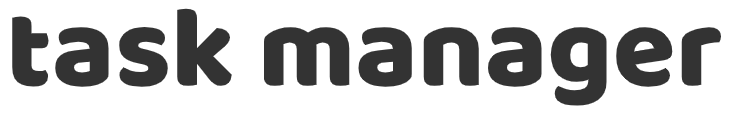
<style>
.page{position:relative;width:731px;height:113px;background:#ffffff}
.page>*{position:absolute;margin:0}
.t1{font:115px "BalooBhai-Regular";color:#333333}
</style>
<div class="page">
<p class="t1" style="left:12px;top:8px;width:709px;height:98px">task manager</p>
</div>
